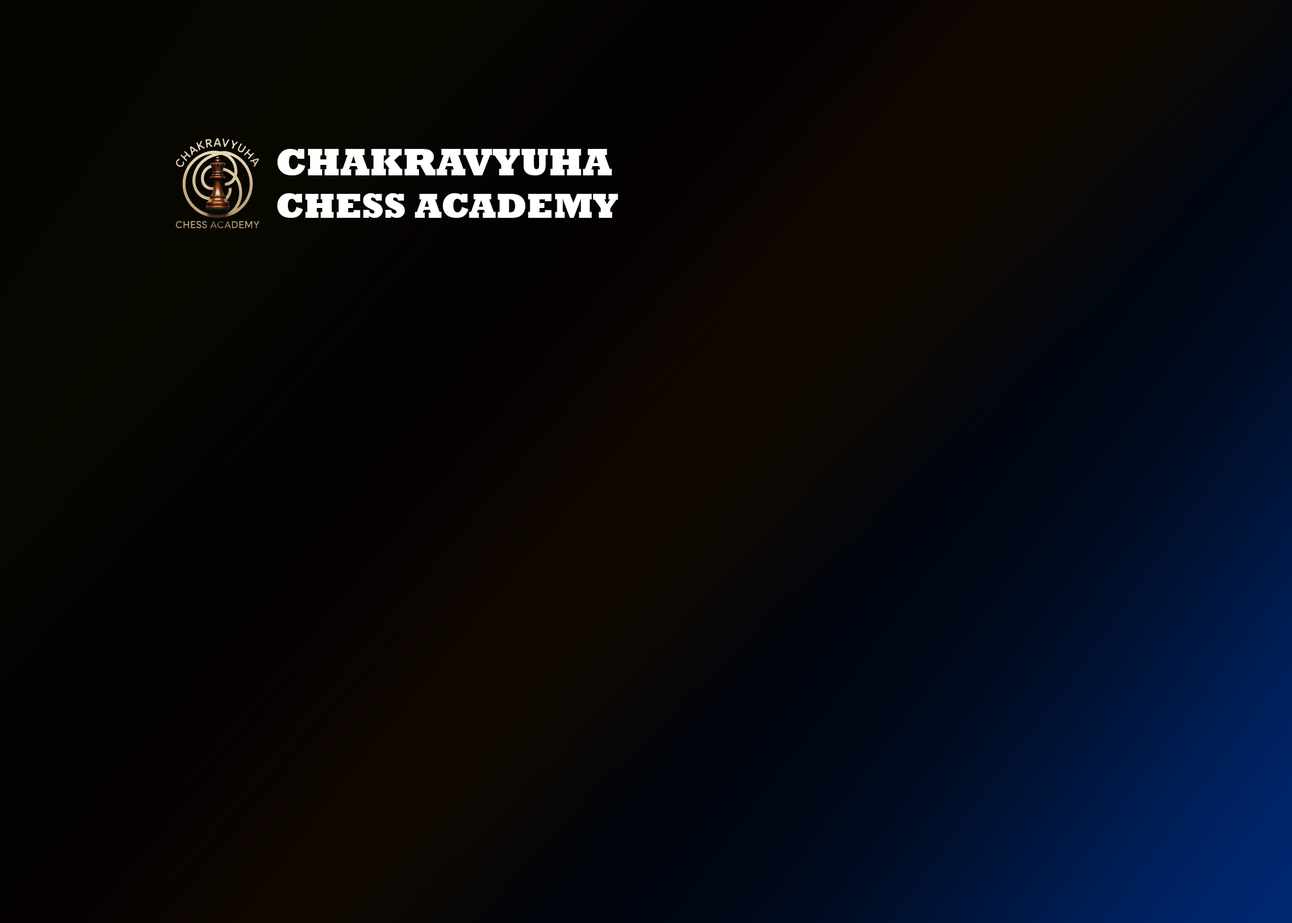
<style>
.page{position:relative;width:1292px;height:923px}
.page>*{position:absolute;margin:0}
.t1{font:35.5px "Rockwell-ExtraBold";color:#ffffff}
.t2{font:38.7px "Rockwell-ExtraBold";color:#ffffff}
</style>
<div class="page">
<p class="t1" style="left:277px;top:149px;width:341px;height:69px"><span class="t2">CHAKRAVYUHA <br></span>CHESS ACADEMY</p>
</div>
